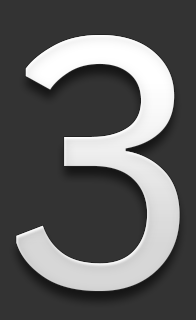
<style>
.page{position:relative;width:196px;height:320px;background:#333333}
.page>*{position:absolute;margin:0}
.t1{font:344.1px "Prelude-Medium";color:#eaeaea}
</style>
<div class="page">
<p class="t1" style="left:16px;top:35px;width:164px;height:256px">3</p>
<p class="t1" style="left:16px;top:35px;width:164px;height:256px">3</p>
</div>
